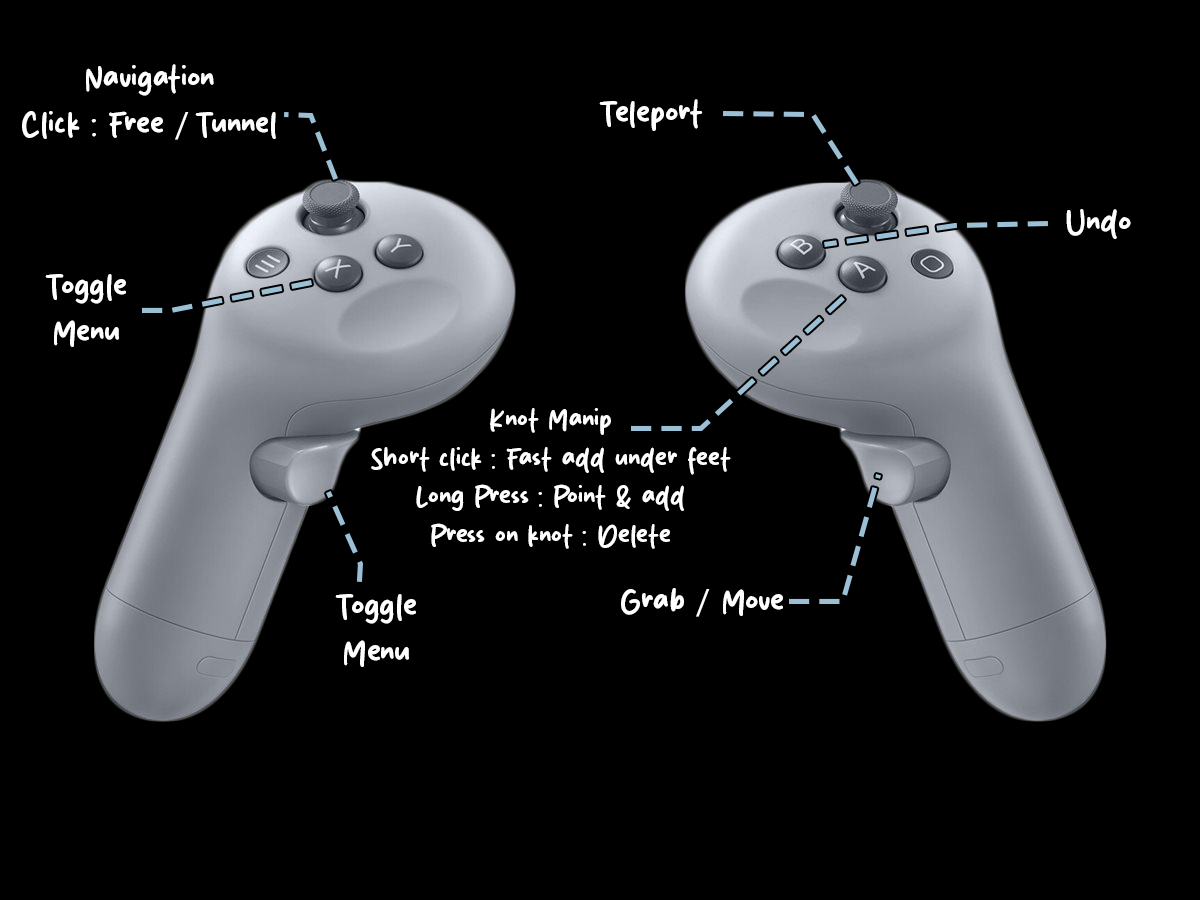
<style>
.page{position:relative;width:1200px;height:900px;background:#000000}
.page>*{position:absolute;margin:0}
.t1{font:38px "MisterySilent";color:#ffffff}
.t2{font:38px "MyriadPro-Regular";color:#ffffff}
.t3{font:32.1px "MisterySilent";color:#ffffff}
</style>
<div class="page">
<p class="t1" style="left:22px;top:64px;width:254px;height:76px;text-align:center">Navigation<br>Click : Free <span class="t2">/ </span>Tunnel</p>
<p class="t1" style="left:599px;top:99px;width:104px;height:32px">Teleport</p>
<p class="t1" style="left:1066px;top:209px;width:65px;height:30px">Undo</p>
<p class="t1" style="left:45px;top:274px;width:81px;height:73px;text-align:center">Toggle<br>Menu</p>
<p class="t3" style="left:371px;top:408px;width:360px;height:141px;text-align:center">Knot Manip<br>Short click : Fast add under feet<br>Long Press : Point &amp; add<br>Press on knot : Delete</p>
<p class="t1" style="left:621px;top:588px;width:162px;height:29px">Grab <span class="t2">/</span> Move</p>
<p class="t1" style="left:335px;top:594px;width:81px;height:73px;text-align:center">Toggle<br>Menu</p>
</div>
